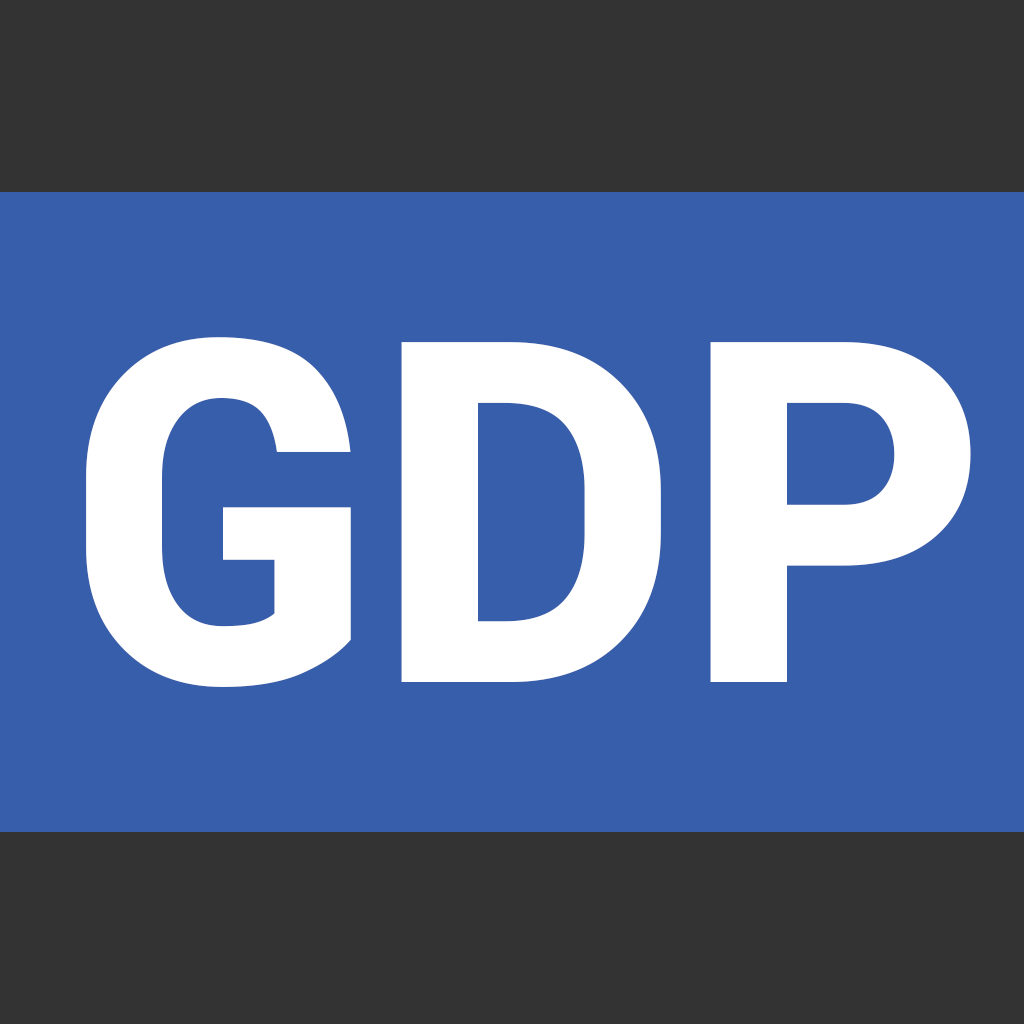
<style>
.page{position:relative;width:1024px;height:1024px;background:#375eab}
.page>*{position:absolute;margin:0}
.t1{font:478.1px "Roboto-Black";letter-spacing:0.01em;color:#ffffff;scale:0.97 1}
</style>
<div class="page">
<p class="t1" style="left:86px;top:337px;width:885px;height:350px">GDP</p>
</div>
